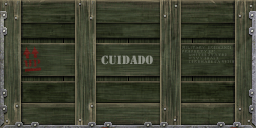
<style>
.page{position:relative;width:256px;height:128px}
.page>*{position:absolute;margin:0}
.t1{font:12.6px "Stencil";letter-spacing:0.02em;color:#8e9186;scale:0.95 1}
</style>
<div class="page">
<p class="t1" style="left:101px;top:55px;width:52px;height:10px">Cuidado</p>
</div>
